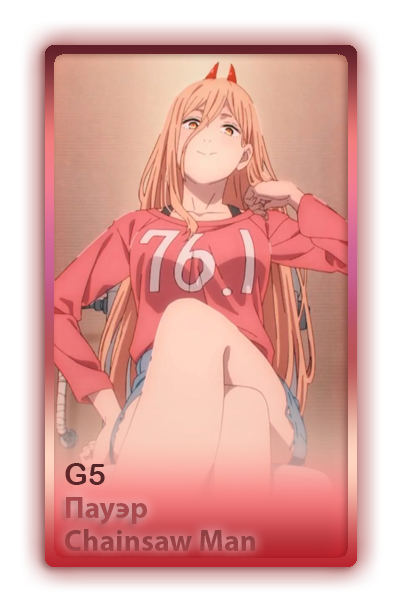
<style>
.page{position:relative;width:402px;height:603px}
.page>*{position:absolute;margin:0}
.t1{font:30px "ArialRoundedMTBold";color:#5d1521}
.t2{font:30px "MyriadPro-Bold";color:#aa4a4e}
.t3{font:30px "MyriadPro-Bold";color:#9c4145}
</style>
<div class="page">
<p class="t1" style="left:65px;top:463px;width:40px;height:22px">G5</p>
<p class="t2" style="left:66px;top:497px;width:81px;height:28px">Пауэр</p>
<p class="t3" style="left:65px;top:529px;width:190px;height:22px">Chainsaw Man</p>
</div>
